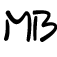
<style>
.page{position:relative;width:57px;height:57px;background:#ffffff}
.page>*{position:absolute;margin:0}
.t1{font:44px "Rosemary";color:#000000}
</style>
<div class="page">
<p class="t1" style="left:4px;top:10px;width:28px;height:32px;rotate:1deg">M</p>
<p class="t1" style="left:32px;top:10px;width:26px;height:32px">B</p>
</div>
